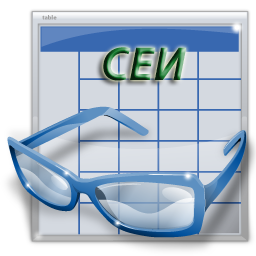
<style>
.page{position:relative;width:256px;height:256px}
.page>*{position:absolute;margin:0}
.t1{font:48px "MyriadPro-BoldIt"}
</style>
<div class="page">
<p class="t1" style="left:103px;top:47px;width:84px;height:34px">СЕИ</p>
</div>
